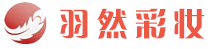
<style>
.page{position:relative;width:211px;height:49px;background:#ffffff}
.page>*{position:absolute;margin:0}
.t1{font:32px "FZCQJW--GB1-0";letter-spacing:0.2em;color:#ec5844}
</style>
<div class="page">
<p class="t1" style="left:60px;top:8px;width:145px;height:31px">羽然彩妆</p>
</div>
